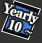
<style>
.page{position:relative;width:42px;height:43px;background:#333333}
.page>*{position:absolute;margin:0}
.t1{font:13px/14px "RyuminPro-ExBold";letter-spacing:-0.08em;color:#ffffff;font-weight:bold}
.t2{font:13px/14px "RyuminPro-ExBold";color:#ffffff;font-weight:bold}
.t3{font:13px/14px "TimesNewRomanPSMT";color:#ffffff;font-weight:bold}
</style>
<div class="page">
<p class="t1" style="left:3px;top:2px;width:36px;height:32px;text-align:center;rotate:19deg">Yearly<br><span class="t2">  10 </span><span class="t3">~</span></p>
</div>
